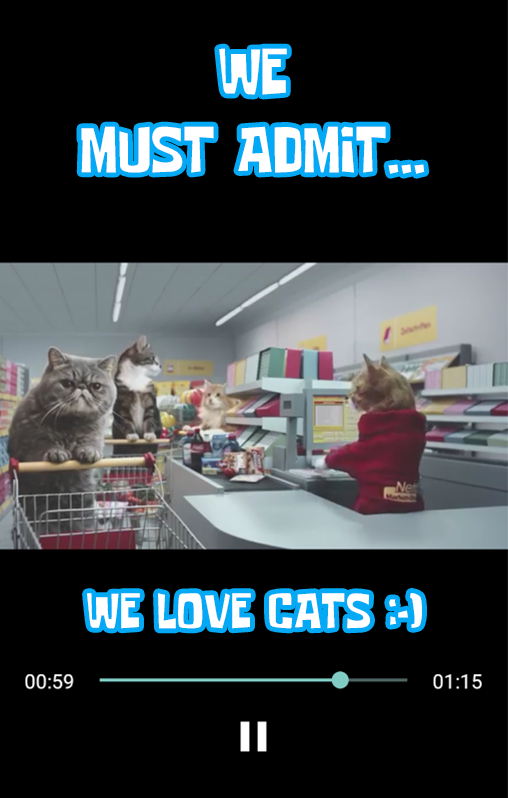
<style>
.page{position:relative;width:508px;height:798px;background:#000000}
.page>*{position:absolute;margin:0}
.t1{font:65px "SomeTimeLater";color:#ffffff}
.t2{font:50px "SomeTimeLater";color:#ffffff}
</style>
<div class="page">
<p class="t1" style="left:81px;top:48px;width:344px;height:126px;text-align:center">WE<br>MUST ADMIT...</p>
<p class="t2" style="left:87px;top:593px;width:335px;height:36px">WE LOVE CATS :-)</p>
</div>
